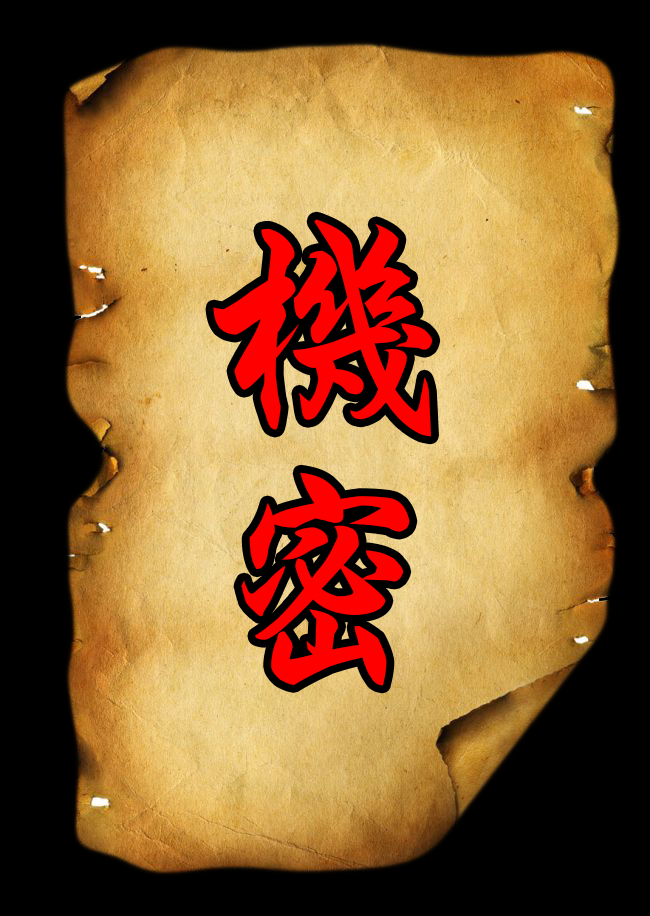
<style>
.page{position:relative;width:650px;height:916px;background:#000000}
.page>*{position:absolute;margin:0}
.t1{font:250px/110px "DFXingKai-W5-WINP-BF";color:#ff0000}
</style>
<div class="page">
<p class="t1" style="left:213px;top:219px;width:220px;height:467px">機密</p>
</div>
